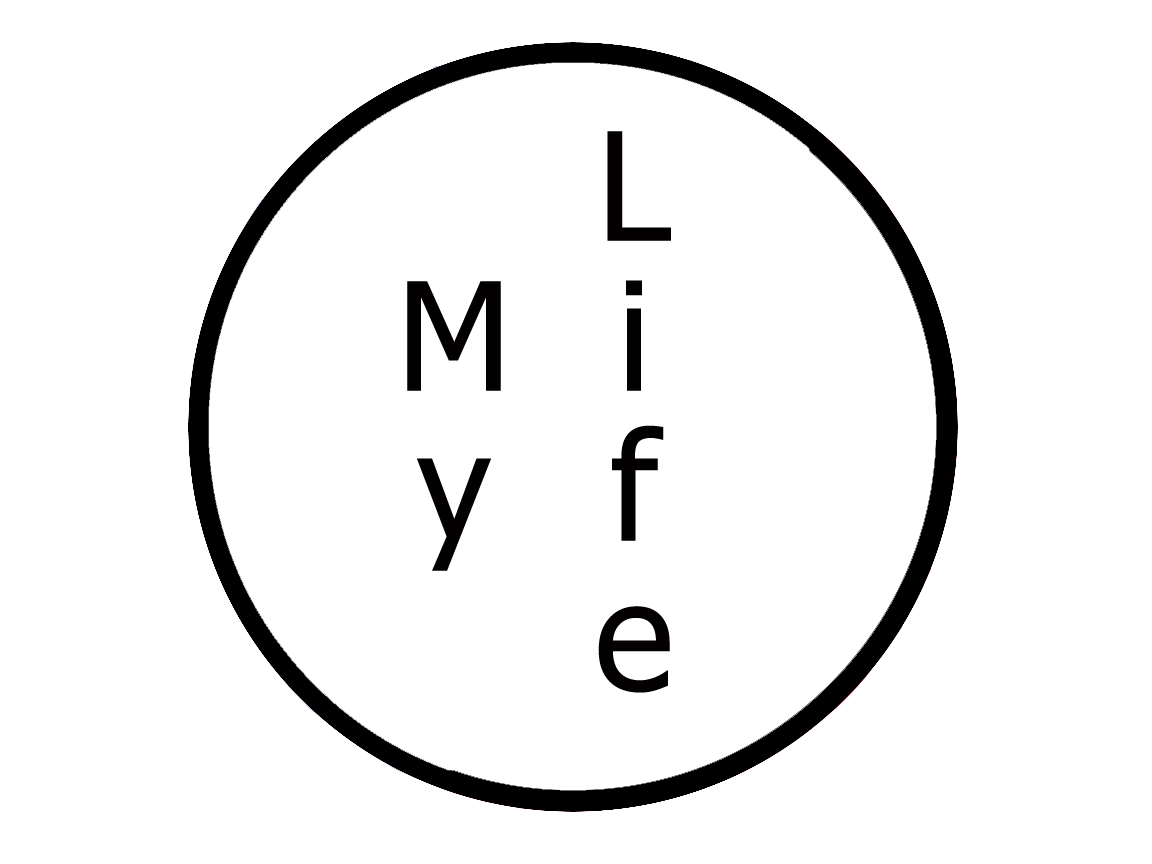
<style>
.page{position:relative;width:1152px;height:864px;background:#ffffff}
.page>*{position:absolute;margin:0}
.t1{font:150px "Tahoma";color:#020000}
</style>
<div class="page">
<p class="t1" style="left:407px;top:131px;width:264px;height:562px;text-align:center">Life<br>My</p>
</div>
